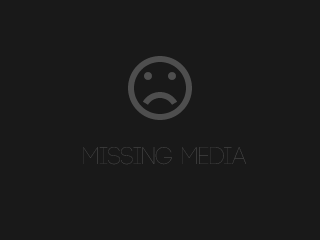
<style>
.page{position:relative;width:320px;height:240px;background:#191919}
.page>*{position:absolute;margin:0}
.t1{font:24px "Code-Light";color:#4e4e4e}
</style>
<div class="page">
<p class="t1" style="left:83px;top:147px;width:163px;height:18px">Missing media</p>
</div>
